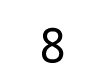
<style>
.page{position:relative;width:105px;height:83px;background:#ffffff}
.page>*{position:absolute;margin:0}
.t1{font:47.9px "DroidSans";color:#000000}
</style>
<div class="page">
<p class="t1" style="left:42px;top:27px;width:22px;height:36px">8</p>
</div>
